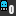
<style>
.page{position:relative;width:16px;height:16px;background:#333333}
.page>*{position:absolute;margin:0}
.t1{font:12px "Gothic821CondensedBT-Regular";color:#f2f2f2}
</style>
<div class="page">
<p class="t1" style="left:9px;top:5px;width:5px;height:9px">0</p>
</div>
